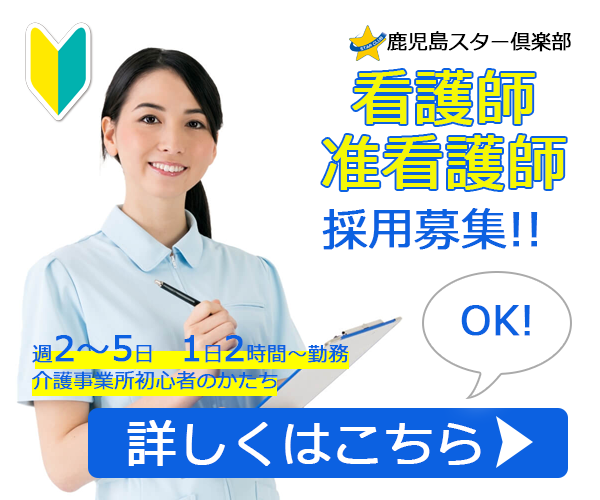
<style>
.page{position:relative;width:600px;height:500px;background:#ffffff}
.page>*{position:absolute;margin:0}
.t1{font:20px "Meiryo";color:#000000;font-weight:bold}
.t2{font:60px/65px "Meiryo";color:#f4f706;font-weight:bold}
.t3{font:45px "Meiryo";color:#0c61e1;font-weight:bold}
.t4{font:40px "Meiryo";color:#0c61e1;font-weight:bold}
.t5{font:20px/40px "Meiryo";color:#0c61e1;font-weight:bold}
.t6{font:35px/40px "Meiryo";color:#0c61e1;font-weight:bold}
.t7{font:50px "Meiryo";color:#ffffff;font-weight:bold}
</style>
<div class="page">
<p class="t1" style="left:387px;top:31px;width:184px;height:21px">鹿児島スター倶楽部</p>
<p class="t2" style="left:322px;top:70px;width:244px;height:120px;text-align:center">看護師<br>准看護師</p>
<p class="t3" style="left:322px;top:208px;width:216px;height:42px">採用募集!!</p>
<p class="t4" style="left:461px;top:305px;width:69px;height:31px">OK!</p>
<p class="t5" style="left:32px;top:335px;width:317px;height:55px">週<span class="t6">2～5</span>日　<span class="t6">1</span>日<span class="t6">2</span>時間～勤務<br>介護事業所初心者のかたち</p>
<p class="t7" style="left:127px;top:420px;width:354px;height:46px">詳しくはこちら</p>
</div>
